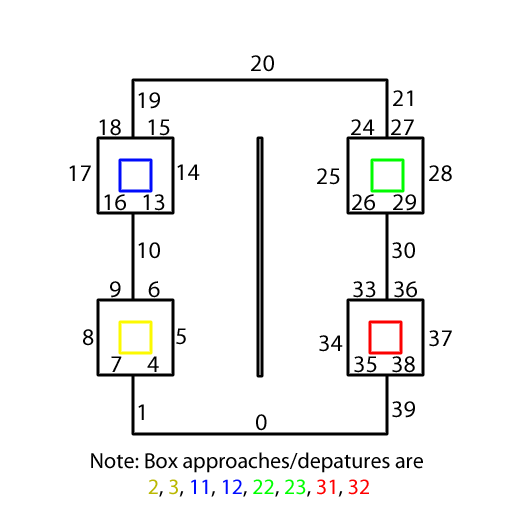
<style>
.page{position:relative;width:512px;height:512px;background:#ffffff}
.page>*{position:absolute;margin:0}
.t1{font:24px "MyriadPro-Regular";color:#000000}
.t2{font:22px "MyriadPro-Regular";color:#000000}
.t3{font:22px "MyriadPro-Regular";color:#bab802}
.t4{font:22px "MyriadPro-Regular";color:#000cff}
.t5{font:22px "MyriadPro-Regular";color:#00ff00}
.t6{font:22px "MyriadPro-Regular";color:#ff0000}
</style>
<div class="page">
<p class="t1" style="left:251px;top:55px;width:23px;height:17px">20</p>
<p class="t1" style="left:138px;top:92px;width:22px;height:17px">19</p>
<p class="t1" style="left:393px;top:90px;width:20px;height:16px">21</p>
<p class="t1" style="left:99px;top:119px;width:22px;height:17px">18</p>
<p class="t1" style="left:148px;top:119px;width:22px;height:17px">15</p>
<p class="t1" style="left:351px;top:119px;width:24px;height:16px">24</p>
<p class="t1" style="left:391px;top:119px;width:23px;height:16px">27</p>
<p class="t1" style="left:69px;top:165px;width:22px;height:16px">17</p>
<p class="t1" style="left:177px;top:164px;width:23px;height:16px">14</p>
<p class="t1" style="left:317px;top:168px;width:23px;height:17px">25</p>
<p class="t1" style="left:429px;top:165px;width:23px;height:17px">28</p>
<p class="t1" style="left:104px;top:194px;width:22px;height:17px">16</p>
<p class="t1" style="left:143px;top:194px;width:22px;height:17px">13</p>
<p class="t1" style="left:352px;top:194px;width:23px;height:17px">26</p>
<p class="t1" style="left:393px;top:194px;width:23px;height:17px">29</p>
<p class="t1" style="left:138px;top:242px;width:22px;height:17px">10</p>
<p class="t1" style="left:392px;top:242px;width:23px;height:17px">30</p>
<p class="t1" style="left:110px;top:281px;width:11px;height:17px">9</p>
<p class="t1" style="left:148px;top:281px;width:12px;height:17px">6</p>
<p class="t1" style="left:353px;top:281px;width:23px;height:17px">33</p>
<p class="t1" style="left:394px;top:281px;width:23px;height:17px">36</p>
<p class="t1" style="left:83px;top:329px;width:11px;height:17px">8</p>
<p class="t1" style="left:176px;top:328px;width:10px;height:17px">5</p>
<p class="t1" style="left:319px;top:335px;width:24px;height:17px">34</p>
<p class="t1" style="left:429px;top:330px;width:23px;height:17px">37</p>
<p class="t1" style="left:111px;top:356px;width:11px;height:16px">7</p>
<p class="t1" style="left:147px;top:356px;width:12px;height:16px">4</p>
<p class="t1" style="left:354px;top:356px;width:23px;height:17px">35</p>
<p class="t1" style="left:392px;top:356px;width:23px;height:17px">38</p>
<p class="t1" style="left:392px;top:401px;width:23px;height:17px">39</p>
<p class="t1" style="left:138px;top:404px;width:6px;height:16px">1</p>
<p class="t1" style="left:256px;top:414px;width:11px;height:17px">0</p>
<p class="t2" style="left:91px;top:452px;width:332px;height:45px;text-align:center">Note: Box approaches/depatures are <br><span class="t3">2</span>,<span class="t3"> 3</span>, <span class="t4">11</span>,<span class="t4"> 12</span>, <span class="t5">22</span>,<span class="t5"> 23</span>, <span class="t6">31</span>,<span class="t6"> 32</span></p>
</div>
